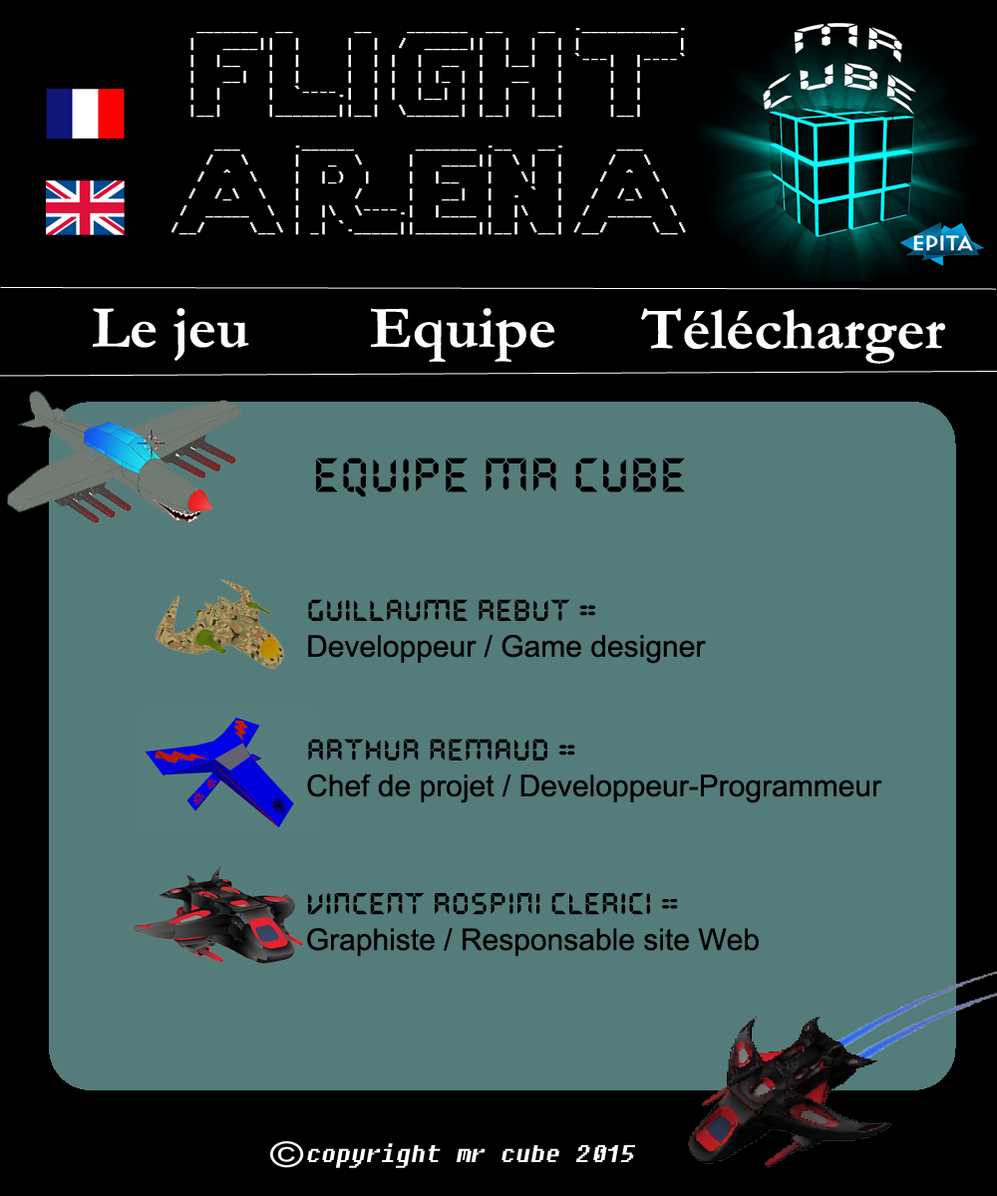
<style>
.page{position:relative;width:997px;height:1196px;background:#547c7a}
.page>*{position:absolute;margin:0}
.t1{font:14px "Fixedsys";color:#ffffff;font-weight:bold}
.t2{font:59.8px "Garamond-Bold";color:#ffffff}
.t3{font:47.8px "QuartzMS";color:#000000}
.t4{font:29.9px "ArialMT";color:#000000}
.t5{font:29.9px "QuartzMS";color:#000000}
.t6{font:23.9px "Fixedsys";color:#ffffff;font-style:italic}
</style>
<div class="page">
<p class="t1" style="left:171px;top:28px;width:515px;height:207px">_______  __       __    _______  __    __  .___________.<br>  |   ____||  |     |  |  /  _____||  |  |  | |           |<br>  |  |__   |  |     |  | |  |  __  |  |__|  | `---|  |----`<br>  |   __|  |  |     |  | |  | |_ | |   __   |     |  |     <br>  |  |     |  `----.|  | |  |__| | |  |  |  |     |  |     <br>  |__|     |_______||__|  \______| |__|  |__|     |__|     <br>                                                         <br>     ___      .______       _______ .__   __.      ___      <br>    /   \     |   _  \     |   ____||  \ |  |     /   \     <br>   /  ^  \    |  |_)  |    |  |__   |   \|  |    /  ^  \    <br>  /  /_\  \   |      /     |   __|  |  . `  |   /  /_\  \   <br> /  _____  \  |  |\  \----.|  |____ |  |\   |  /  _____  \  <br>/__/     \__\ | _| `._____||_______||__| \__| /__/     \__\</p>
<p class="t2" style="left:93px;top:308px;width:156px;height:53px">Le jeu</p>
<p class="t2" style="left:371px;top:308px;width:184px;height:54px">Equipe</p>
<p class="t2" style="left:641px;top:308px;width:305px;height:56px">Télécharger</p>
<p class="t3" style="left:316px;top:458px;width:369px;height:39px">Equipe Mr cube</p>
<p class="t4" style="left:308px;top:599px;width:398px;height:65px"><span class="t5">Guillaume rebut = <br></span>Developpeur / Game designer</p>
<p class="t4" style="left:307px;top:739px;width:575px;height:64px"><span class="t5">Arthur Remaud = <br></span>Chef de projet / Developpeur-Programmeur</p>
<p class="t4" style="left:307px;top:893px;width:452px;height:64px"><span class="t5">Vincent Rospini Clerici = <br></span>Graphiste / Responsable site Web</p>
<p class="t6" style="left:307px;top:1143px;width:328px;height:25px">copyright mr cube 2015</p>
</div>
